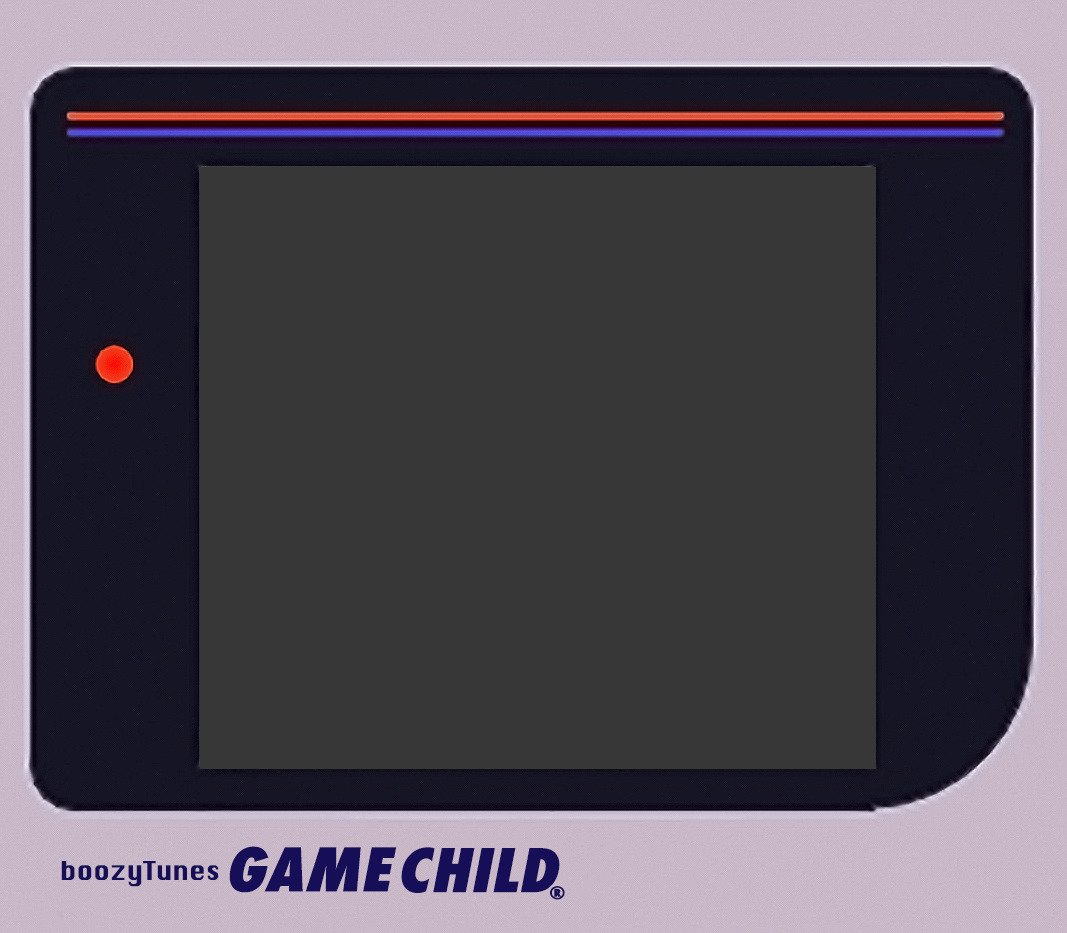
<style>
.page{position:relative;width:1067px;height:933px;background:#373737}
.page>*{position:absolute;margin:0}
.t1{font:58.3px "Futura-CondensedExtraBold";letter-spacing:0.01em;color:#170e58;font-style:italic;scale:1.1 1}
.t2{font:25px "Krungthep";color:#170e58}
.t3{font:16.7px "Futura-CondensedExtraBold";letter-spacing:0.01em;color:#170e58;scale:1.1 1}
</style>
<div class="page">
<p class="t1" style="left:229px;top:846px;width:168px;height:47px">GAME</p>
<p class="t1" style="left:401px;top:847px;width:159px;height:46px">CHILD</p>
<p class="t2" style="left:61px;top:861px;width:158px;height:26px">boozyTunes</p>
<p class="t3" style="left:550px;top:886px;width:15px;height:14px">®</p>
</div>
